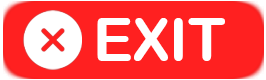
<style>
.page{position:relative;width:266px;height:80px;background:#ff2020}
.page>*{position:absolute;margin:0}
.t1{font:60px "ArialRoundedMTBold";color:#ffffff}
</style>
<div class="page">
<p class="t1" style="left:97px;top:18px;width:128px;height:43px">EXIT</p>
</div>
